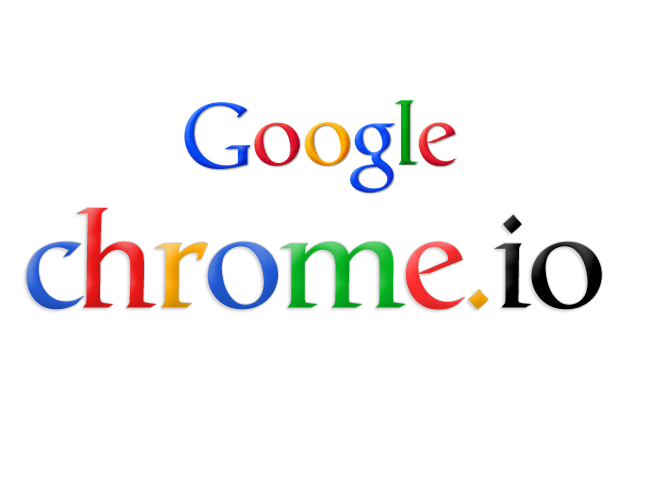
<style>
.page{position:relative;width:660px;height:500px;background:#ffffff}
.page>*{position:absolute;margin:0}
.t1{font:140.8px "Catull-Regular";letter-spacing:-0.015em;color:#000000}
.t2{font:140.8px "Catull-Regular";letter-spacing:-0.015em;color:#2359d2}
.t3{font:140.8px "Catull-Regular";letter-spacing:-0.015em;color:#ee1818}
.t4{font:140.8px "Catull-Regular";letter-spacing:-0.015em;color:#f9a600}
.t5{font:140.8px "Catull-Regular";letter-spacing:-0.015em;color:#2059d4}
.t6{font:140.8px "Catull-Regular";letter-spacing:-0.015em;color:#06b421}
.t7{font:140.8px "Catull-Regular";letter-spacing:-0.015em;color:#ff2c2c}
.t8{font:140.8px "Catull-Regular";letter-spacing:-0.015em;color:#f1a100}
</style>
<div class="page">
<p class="t1" style="left:26px;top:208px;width:576px;height:102px"><span class="t2">c</span><span class="t3">h</span><span class="t4">r</span><span class="t5">o</span><span class="t6">m</span><span class="t7">e</span><span class="t8">.</span>io</p>
</div>
